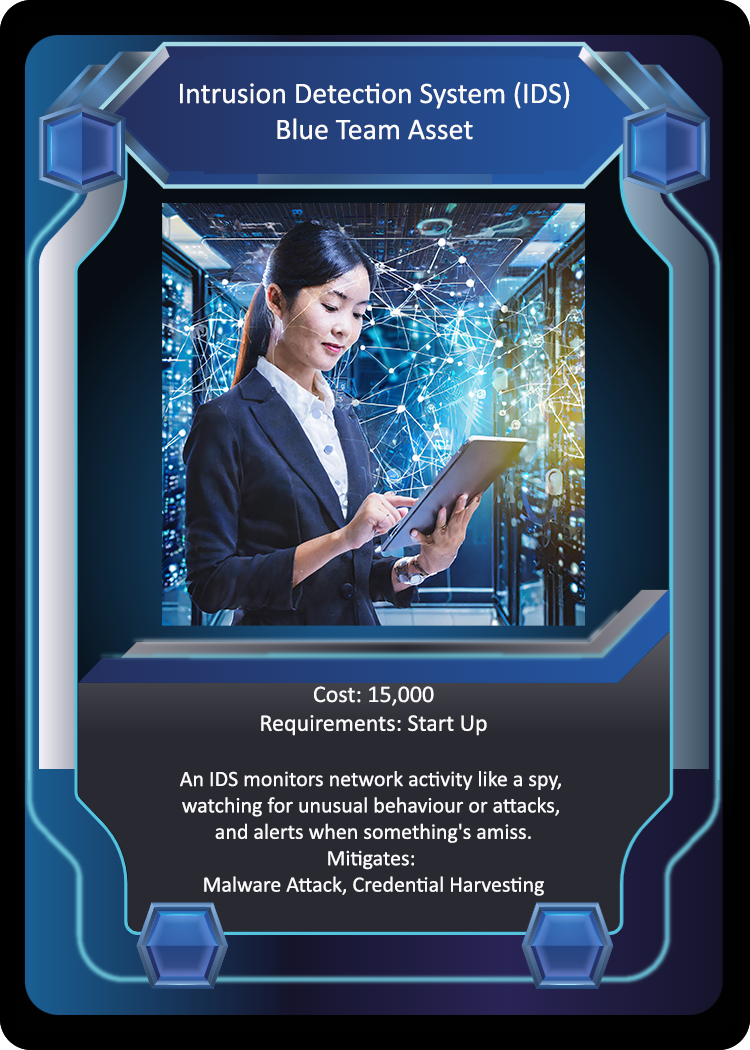
<style>
.page{position:relative;width:750px;height:1050px}
.page>*{position:absolute;margin:0}
.t1{font:30px "Calibri";color:#fcfbfb}
.t2{font:22px "Calibri";color:#fcfbfb}
.t3{font:24px "Calibri";color:#fcfbfb}
</style>
<div class="page">
<p class="t1" style="left:180px;top:82px;width:390px;height:58px;text-align:center">Intrusion Detection System (IDS)<br>Blue Team Asset</p>
<p class="t2" style="left:180px;top:686px;width:381px;height:210px;text-align:center"><span class="t3">Cost: 15,000<br>Requirements: Start Up<br><br></span>An IDS monitors network activity like a spy, <br>watching for unusual behaviour or attacks, <br>and alerts when something's amiss.<br>Mitigates: <br>Malware Attack, Credential Harvesting</p>
</div>
